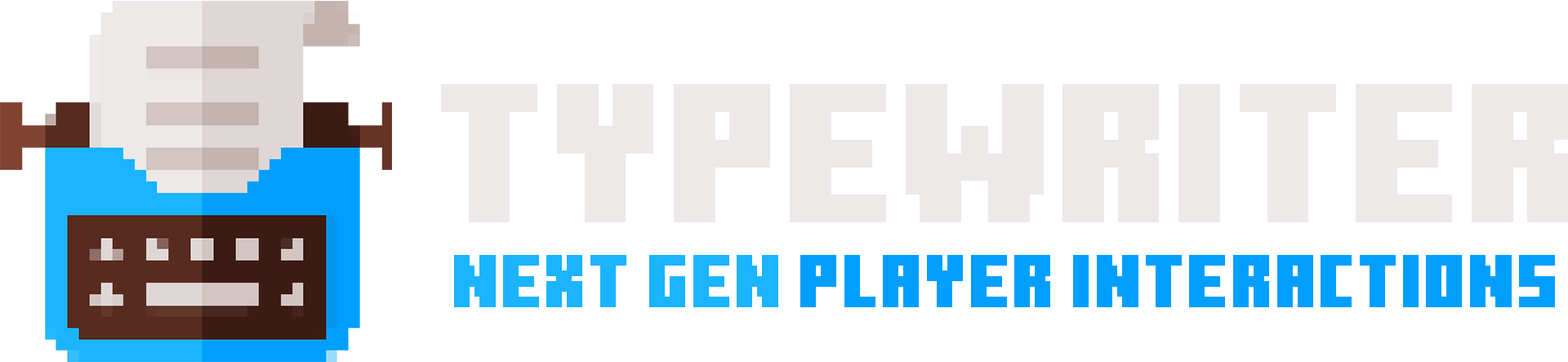
<style>
.page{position:relative;width:1568px;height:362px;background:#ffffff}
.page>*{position:absolute;margin:0}
.t1{font:196.9px "MinecraftTen";color:#ede9e8}
.t2{font:74.4px "MinecraftTen";color:#009fff}
.t3{font:74.4px "MinecraftTen";color:#1ab4ff}
</style>
<div class="page">
<p class="t1" style="left:441px;top:84px;width:1127px;height:138px">Typewriter</p>
<p class="t2" style="left:454px;top:255px;width:1101px;height:52px"><span class="t3">Next Gen</span> Player Interactions</p>
</div>
